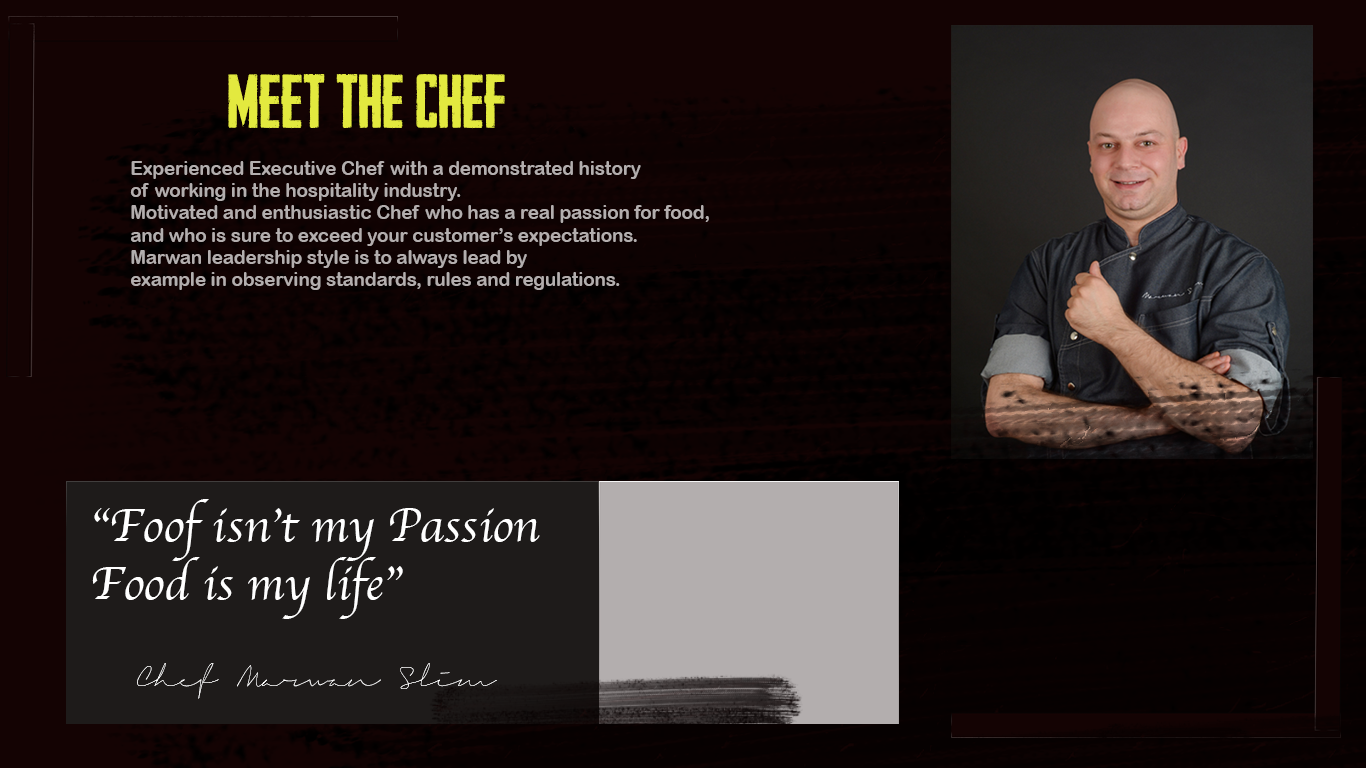
<style>
.page{position:relative;width:1366px;height:768px}
.page>*{position:absolute;margin:0}
.t1{font:72px "HeadlinerNo.45";color:#e3e93f}
.t2{font:18.6px "ArialRoundedMTBold";color:#b3aeae}
</style>
<div class="page">
<p class="t1" style="left:228px;top:74px;width:277px;height:55px">Meet the chef</p>
<p class="t2" style="left:130px;top:161px;width:579px;height:129px">Experienced Executive Chef with a demonstrated history <br>of working in the hospitality industry. <br>Motivated and enthusiastic Chef who has a real passion for food, <br>and who is sure to exceed your customer’s expectations. <br>Marwan leadership style is to always lead by <br>example in observing standards, rules and regulations.</p>
</div>
